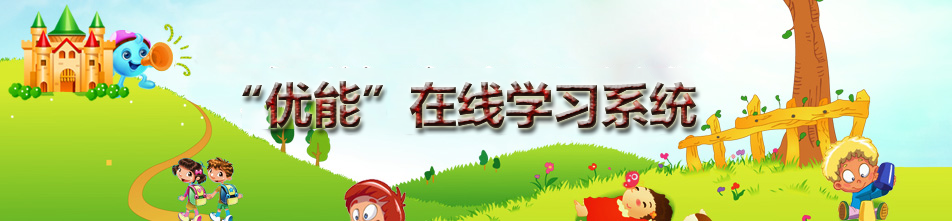
<style>
.page{position:relative;width:952px;height:221px}
.page>*{position:absolute;margin:0}
.t1{font:48px "MicrosoftYaHei-Bold"}
</style>
<div class="page">
<p class="t1" style="left:242px;top:81px;width:455px;height:47px">“优能”在线学习系统</p>
</div>
